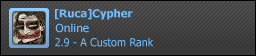
<style>
.page{position:relative;width:256px;height:56px}
.page>*{position:absolute;margin:0}
.t1{font:10.7px "Tahoma-Bold";color:#6fbdff;scale:1.05 1}
.t2{font:11px "Tahoma";color:#6fbdff;scale:1.1 1}
.t3{font:11px "Tahoma";color:#6fbdff}
</style>
<div class="page">
<p class="t1" style="left:55px;top:9px;width:78px;height:11px">[Ruca]Cypher</p>
<p class="t2" style="left:55px;top:23px;width:34px;height:10px">Online</p>
<p class="t3" style="left:55px;top:38px;width:99px;height:9px">2.9 - A Custom Rank</p>
</div>
